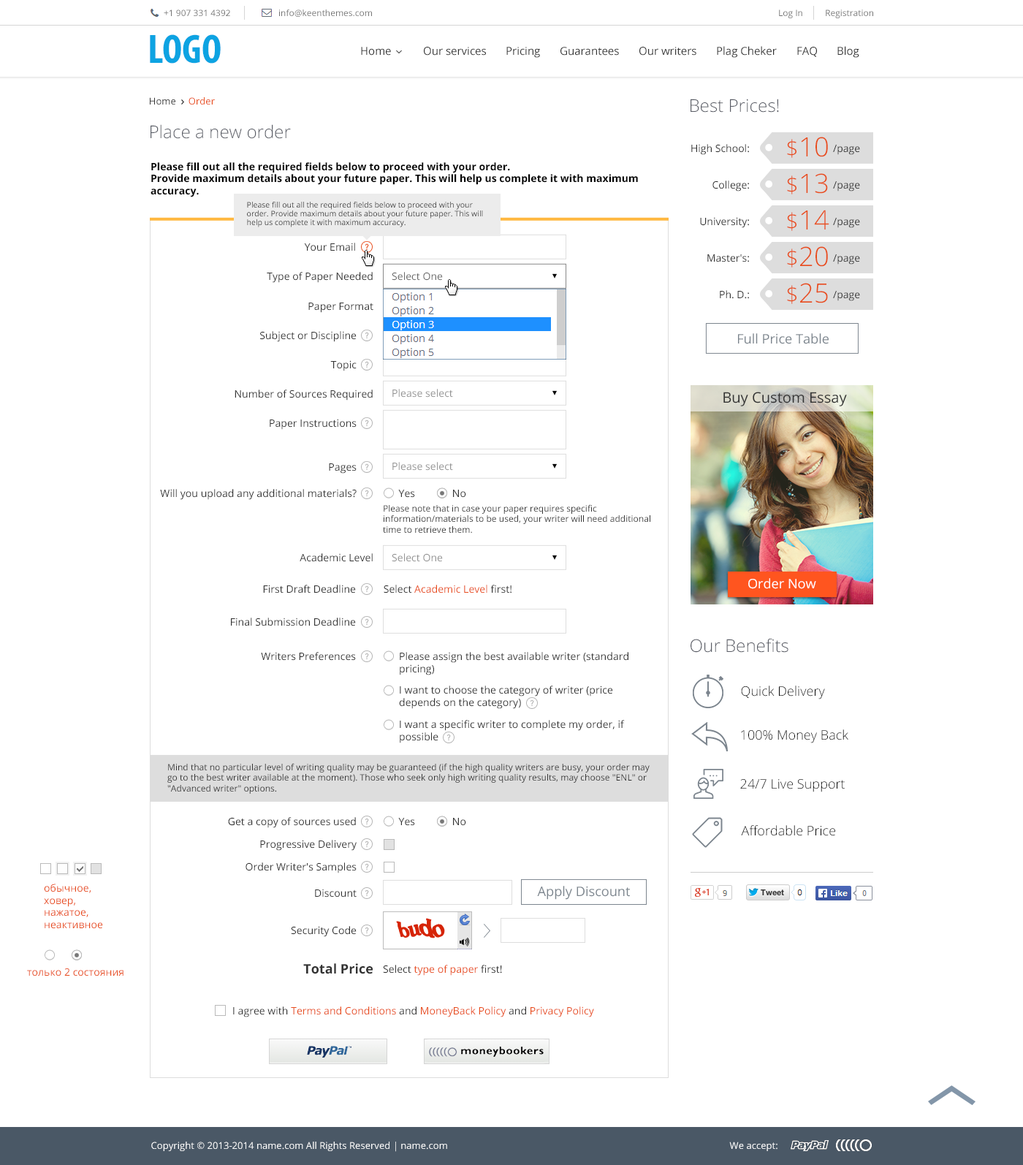
<style>
.page{position:relative;width:1023px;height:1165px;background:#ffffff}
.page>*{position:absolute;margin:0}
.t1{font:8.8px "OpenSans";color:#737373}
.t2{font:41.3px "MyriadPro-BoldCond";color:#0da3e2}
.t3{font:11px "OpenSans";color:#333333}
.t4{font:9.5px "OpenSans";color:#e84d1c}
.t5{font:9.5px "OpenSans";color:#333333}
.t6{font:17.5px "OpenSans-Light";color:#5a5d66}
.t7{font:26.6px "OpenSans-Light";color:#e84d1c}
.t8{font:22.7px "OpenSans-Light";color:#e84d1c}
.t9{font:10.2px "OpenSans";color:#333333}
.t10{font:10.2px "OpenSans-Bold";color:#000000}
.t11{font:7.3px "OpenSans";color:#333333}
.t12{font:10.2px "OpenSans";color:#696969}
.t13{font:13.2px "OpenSans";color:#7c858e}
.t14{font:10.2px "OpenSans";color:#949494}
.t15{font:8.8px "OpenSans";color:#333333}
.t16{font:10.2px "OpenSans";color:#e84d1c}
.t17{font:13.2px "OpenSans-Light";color:#000000}
.t18{font:13.2px "OpenSans-Bold";color:#333333}
</style>
<div class="page">
<p class="t1" style="left:164px;top:10px;width:66px;height:6px">+1 907 331 4392</p>
<p class="t1" style="left:279px;top:10px;width:93px;height:7px">info@keenthemes.com</p>
<p class="t1" style="left:779px;top:10px;width:24px;height:8px">Log In</p>
<p class="t1" style="left:826px;top:10px;width:48px;height:8px">Registration</p>
<p class="t2" style="left:150px;top:34px;width:71px;height:30px">LOGO</p>
<p class="t3" style="left:361px;top:47px;width:30px;height:9px">Home</p>
<p class="t3" style="left:424px;top:47px;width:62px;height:9px">Our services</p>
<p class="t3" style="left:507px;top:47px;width:33px;height:11px">Pricing</p>
<p class="t3" style="left:561px;top:47px;width:58px;height:9px">Guarantees</p>
<p class="t3" style="left:640px;top:47px;width:57px;height:9px">Our writers</p>
<p class="t3" style="left:717px;top:46px;width:60px;height:12px">Plag Cheker</p>
<p class="t3" style="left:798px;top:47px;width:19px;height:10px">FAQ</p>
<p class="t3" style="left:838px;top:46px;width:22px;height:12px">Blog</p>
<p class="t4" style="left:150px;top:97px;width:65px;height:8px"><span class="t5">Home     </span>Order</p>
<p class="t6" style="left:691px;top:99px;width:88px;height:14px">Best Prices!</p>
<p class="t6" style="left:151px;top:124px;width:140px;height:15px">Place a new order</p>
<p class="t7" style="left:787px;top:137px;width:41px;height:21px"><span class="t8">$</span>10</p>
<p class="t9" style="left:692px;top:144px;width:57px;height:11px">High School:</p>
<p class="t9" style="left:833px;top:145px;width:27px;height:10px">/page</p>
<p class="t10" style="left:151px;top:162px;width:487px;height:35px">Please fill out all the required fields below to proceed with your order.<br>Provide maximum details about your future paper. This will help us complete it with maximum accuracy.</p>
<p class="t7" style="left:787px;top:173px;width:41px;height:21px"><span class="t8">$</span>13</p>
<p class="t9" style="left:713px;top:181px;width:36px;height:11px">College:</p>
<p class="t9" style="left:833px;top:181px;width:27px;height:11px">/page</p>
<p class="t11" style="left:247px;top:202px;width:236px;height:25px">Please fill out all the required fields below to proceed with your order. Provide maximum details about your future paper. This will help us complete it with maximum accuracy.</p>
<p class="t7" style="left:787px;top:210px;width:43px;height:21px"><span class="t8">$</span>14</p>
<p class="t9" style="left:700px;top:217px;width:49px;height:11px">University:</p>
<p class="t9" style="left:833px;top:218px;width:27px;height:10px">/page</p>
<p class="t9" style="left:304px;top:243px;width:51px;height:8px">Your Email</p>
<p class="t9" style="left:708px;top:254px;width:41px;height:8px">Master's:</p>
<p class="t7" style="left:787px;top:246px;width:41px;height:22px"><span class="t8">$</span>20</p>
<p class="t9" style="left:833px;top:254px;width:27px;height:11px">/page</p>
<p class="t9" style="left:267px;top:272px;width:106px;height:11px">Type of Paper Needed</p>
<p class="t12" style="left:392px;top:272px;width:51px;height:9px">Select One</p>
<p class="t9" style="left:720px;top:290px;width:29px;height:9px">Ph. D.:</p>
<p class="t7" style="left:787px;top:283px;width:41px;height:21px"><span class="t8">$</span>25</p>
<p class="t9" style="left:833px;top:291px;width:27px;height:10px">/page</p>
<p class="t9" style="left:308px;top:303px;width:66px;height:10px">Paper Format</p>
<p class="t9" style="left:260px;top:331px;width:97px;height:11px">Subject or Discipline</p>
<p class="t13" style="left:738px;top:333px;width:91px;height:11px">Full Price Table</p>
<p class="t9" style="left:330px;top:360px;width:27px;height:11px">Topic</p>
<p class="t9" style="left:235px;top:390px;width:138px;height:11px">Number of Sources Required</p>
<p class="t14" style="left:393px;top:389px;width:60px;height:9px">Please select</p>
<p class="t9" style="left:270px;top:419px;width:87px;height:11px">Paper Instructions</p>
<p class="t14" style="left:393px;top:462px;width:60px;height:9px">Please select</p>
<p class="t9" style="left:329px;top:463px;width:28px;height:11px">Pages</p>
<p class="t9" style="left:160px;top:489px;width:197px;height:11px">Will you upload any additional materials?</p>
<p class="t9" style="left:398px;top:490px;width:17px;height:8px">Yes</p>
<p class="t9" style="left:453px;top:490px;width:13px;height:8px">No</p>
<p class="t15" style="left:383px;top:504px;width:268px;height:30px">Please note that in case your paper requires specific information/materials to be used, your writer will need additional time to retrieve them.</p>
<p class="t9" style="left:300px;top:553px;width:73px;height:9px">Academic Level</p>
<p class="t14" style="left:392px;top:553px;width:51px;height:9px">Select One</p>
<p class="t9" style="left:263px;top:585px;width:93px;height:9px">First Draft Deadline</p>
<p class="t16" style="left:384px;top:585px;width:128px;height:9px"><span class="t9">Select </span>Academic Level <span class="t9">first!</span></p>
<p class="t9" style="left:231px;top:618px;width:125px;height:8px">Final Submission Deadline</p>
<p class="t6" style="left:691px;top:638px;width:98px;height:15px">Our Benefits</p>
<p class="t9" style="left:261px;top:652px;width:95px;height:9px">Writers Preferences</p>
<p class="t9" style="left:400px;top:652px;width:229px;height:23px">Please assign the best available writer (standard pricing)</p>
<p class="t9" style="left:399px;top:686px;width:214px;height:23px">I want to choose the category of writer (price depends on the category)</p>
<p class="t17" style="left:741px;top:686px;width:84px;height:14px">Quick Delivery</p>
<p class="t9" style="left:400px;top:720px;width:225px;height:23px">I want a specific writer to complete my order, if possible</p>
<p class="t17" style="left:741px;top:730px;width:108px;height:13px">100% Money Back</p>
<p class="t15" style="left:167px;top:763px;width:483px;height:31px">Mind that no particular level of writing quality may be guaranteed (if the high quality writers are busy, your order may go to the best writer available at the moment). Those who seek only high writing quality results, may choose "ENL" or "Advanced writer" options.</p>
<p class="t17" style="left:740px;top:779px;width:105px;height:13px">24/7 Live Support</p>
<p class="t9" style="left:228px;top:817px;width:128px;height:11px">Get a copy of sources used</p>
<p class="t9" style="left:398px;top:818px;width:17px;height:8px">Yes</p>
<p class="t9" style="left:453px;top:818px;width:13px;height:8px">No</p>
<p class="t17" style="left:741px;top:825px;width:95px;height:11px">Affordable Price</p>
<p class="t9" style="left:260px;top:840px;width:97px;height:11px">Progressive Delivery</p>
<p class="t9" style="left:246px;top:863px;width:111px;height:11px">Order Writer's Samples</p>
<p class="t16" style="left:44px;top:884px;width:59px;height:45px">обычное, <br>ховер, <br>нажатое, <br>неактивное</p>
<p class="t9" style="left:315px;top:889px;width:42px;height:9px">Discount</p>
<p class="t13" style="left:537px;top:886px;width:93px;height:14px">Apply Discount</p>
<p class="t9" style="left:291px;top:926px;width:66px;height:11px">Security Code</p>
<p class="t18" style="left:303px;top:963px;width:70px;height:11px">Total Price</p>
<p class="t16" style="left:383px;top:965px;width:119px;height:11px"><span class="t9">Select </span>type of paper<span class="t9"> first!</span></p>
<p class="t16" style="left:27px;top:968px;width:97px;height:9px">только 2 состояния</p>
<p class="t16" style="left:233px;top:1007px;width:361px;height:11px"><span class="t9">I agree with </span>Terms and Conditions<span class="t9"> and </span>MoneyBack Policy<span class="t9"> and </span>Privacy Policy</p>
</div>
